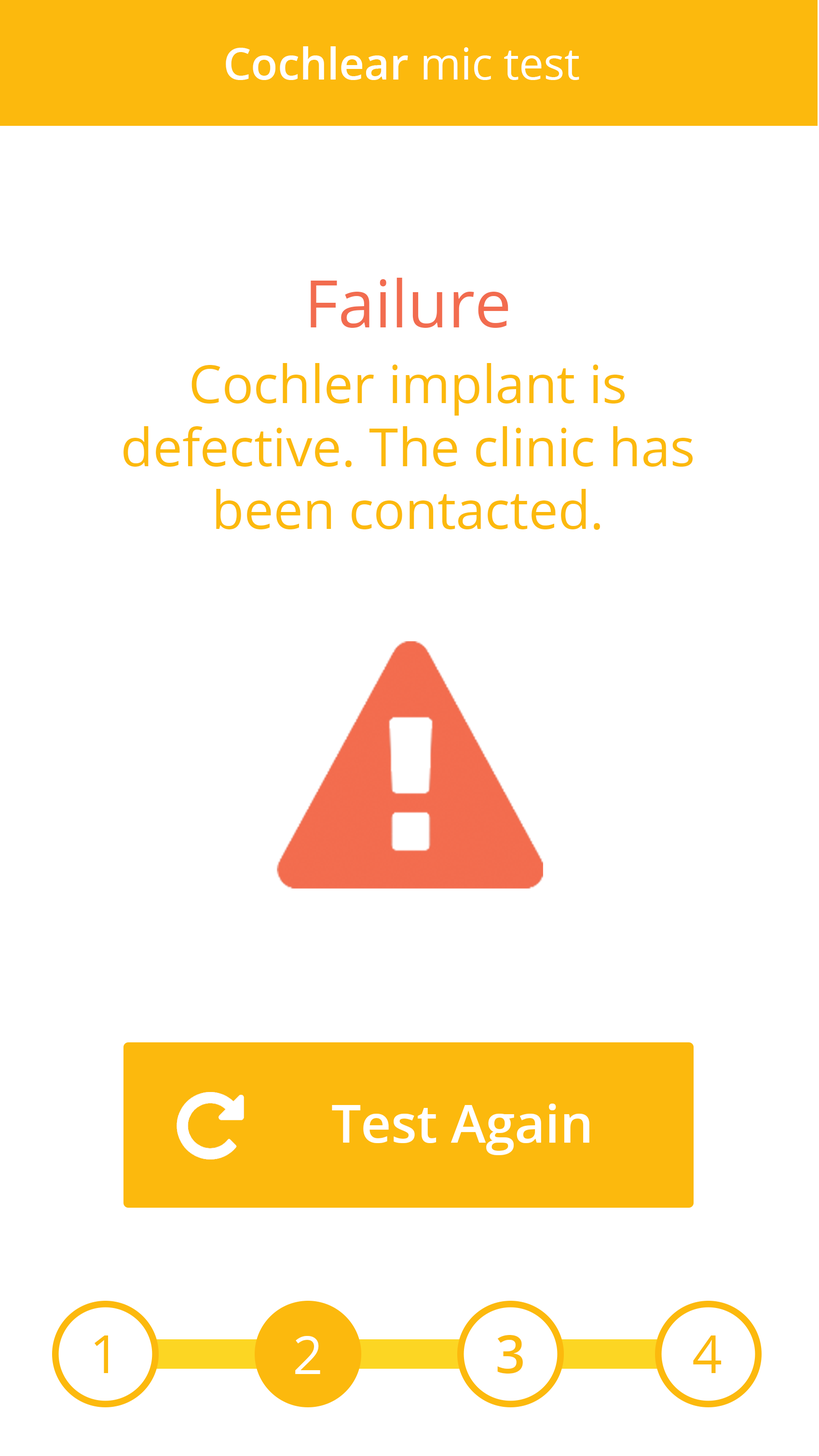
<style>
.page{position:relative;width:819px;height:1456px;background:#ffffff}
.page>*{position:absolute;margin:0}
.t1{font:43.7px "OpenSans-Semibold";color:#ffffff}
.t2{font:43.7px "OpenSans";color:#ffffff}
.t3{font:52.4px "OpenSans";color:#fcb90d}
.t4{font:65.5px "OpenSans";color:#f26c4f}
.t5{font:52.4px "OpenSans-Semibold";color:#ffffff}
.t6{font:52.4px "OpenSans";color:#ffffff}
.t7{font:52.4px "OpenSans-Semibold";color:#fcb90d}
</style>
<div class="page">
<p class="t1" style="left:226px;top:46px;width:353px;height:34px">Cochlear <span class="t2">mic test</span></p>
<p class="t3" style="left:123px;top:278px;width:569px;height:252px;text-align:center"><span class="t4">Failure<br><br></span>Cochler implant is <br>defective. The clinic has been contacted.</p>
<p class="t5" style="left:332px;top:1104px;width:257px;height:51px">Test Again</p>
<p class="t3" style="left:94px;top:1336px;width:14px;height:37px">1</p>
<p class="t6" style="left:295px;top:1336px;width:25px;height:38px">2</p>
<p class="t7" style="left:497px;top:1335px;width:26px;height:39px">3</p>
<p class="t3" style="left:693px;top:1336px;width:28px;height:37px">4</p>
</div>
